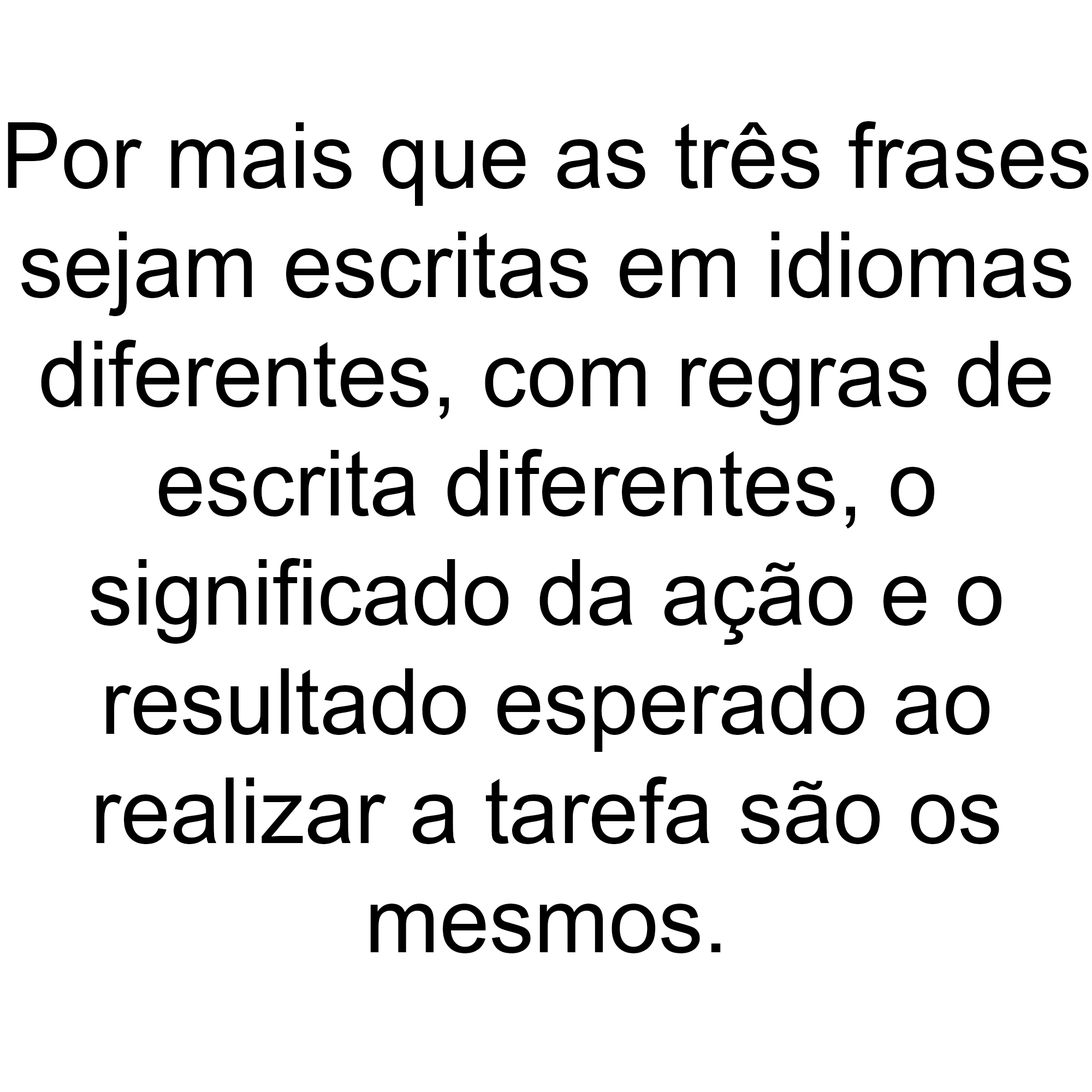
<style>
.page{position:relative;width:1092px;height:1092px;background:#ffffff}
.page>*{position:absolute;margin:0}
.t1{font:91px "ArialMT";color:#000000}
</style>
<div class="page">
<p class="t1" style="left:8px;top:121px;width:1081px;height:832px;text-align:center">Por mais que as três frases<br>sejam escritas em idiomas<br>diferentes, com regras de<br>escrita diferentes, o<br>significado da ação e o<br>resultado esperado ao<br>realizar a tarefa são os<br>mesmos.</p>
</div>
